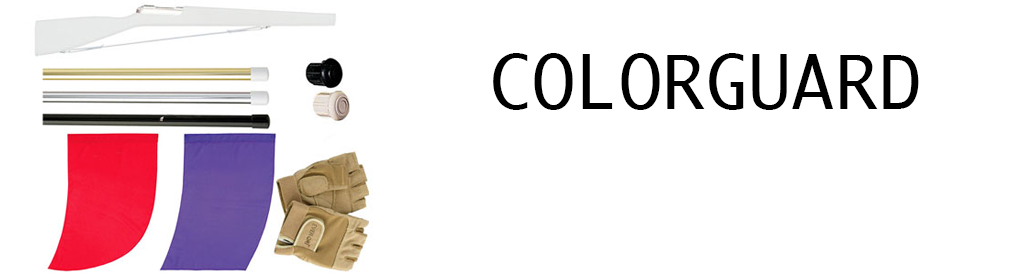
<style>
.page{position:relative;width:1024px;height:280px;background:#ffffff}
.page>*{position:absolute;margin:0}
.t1{font:72px "Ayuthaya";color:#000000}
</style>
<div class="page">
<p class="t1" style="left:493px;top:53px;width:426px;height:57px">COLORGUARD</p>
</div>
